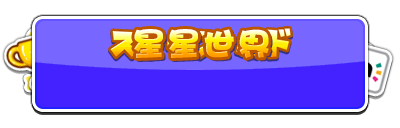
<style>
.page{position:relative;width:400px;height:128px;background:#ffffff}
.page>*{position:absolute;margin:0}
.t1{font:32px "DFPHaiBaoW12";letter-spacing:0.1em}
</style>
<div class="page">
<p class="t1" style="left:134px;top:29px;width:135px;height:29px">星星世界</p>
</div>
